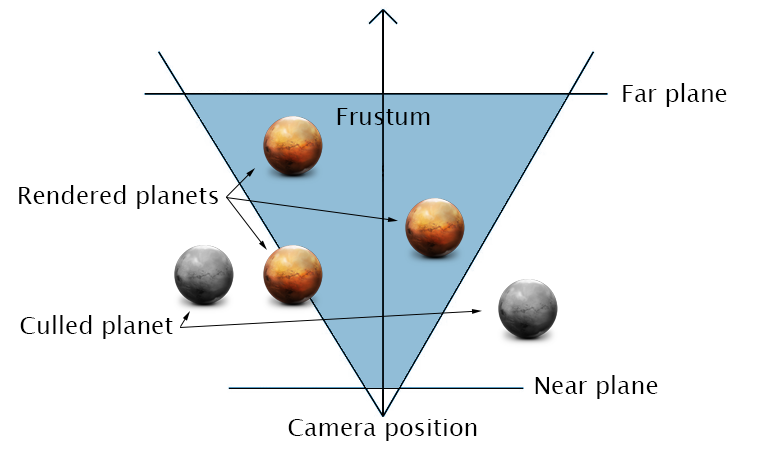
<style>
.page{position:relative;width:759px;height:450px;background:#ffffff}
.page>*{position:absolute;margin:0}
.t1{font:24px "LucidaSansUnicode";color:#000000}
</style>
<div class="page">
<p class="t1" style="left:623px;top:83px;width:104px;height:24px">Far plane</p>
<p class="t1" style="left:337px;top:108px;width:93px;height:17px">Frustum</p>
<p class="t1" style="left:19px;top:185px;width:199px;height:24px">Rendered planets</p>
<p class="t1" style="left:20px;top:315px;width:153px;height:24px">Culled planet</p>
<p class="t1" style="left:535px;top:375px;width:123px;height:24px">Near plane</p>
<p class="t1" style="left:288px;top:419px;width:189px;height:22px">Camera position</p>
</div>
